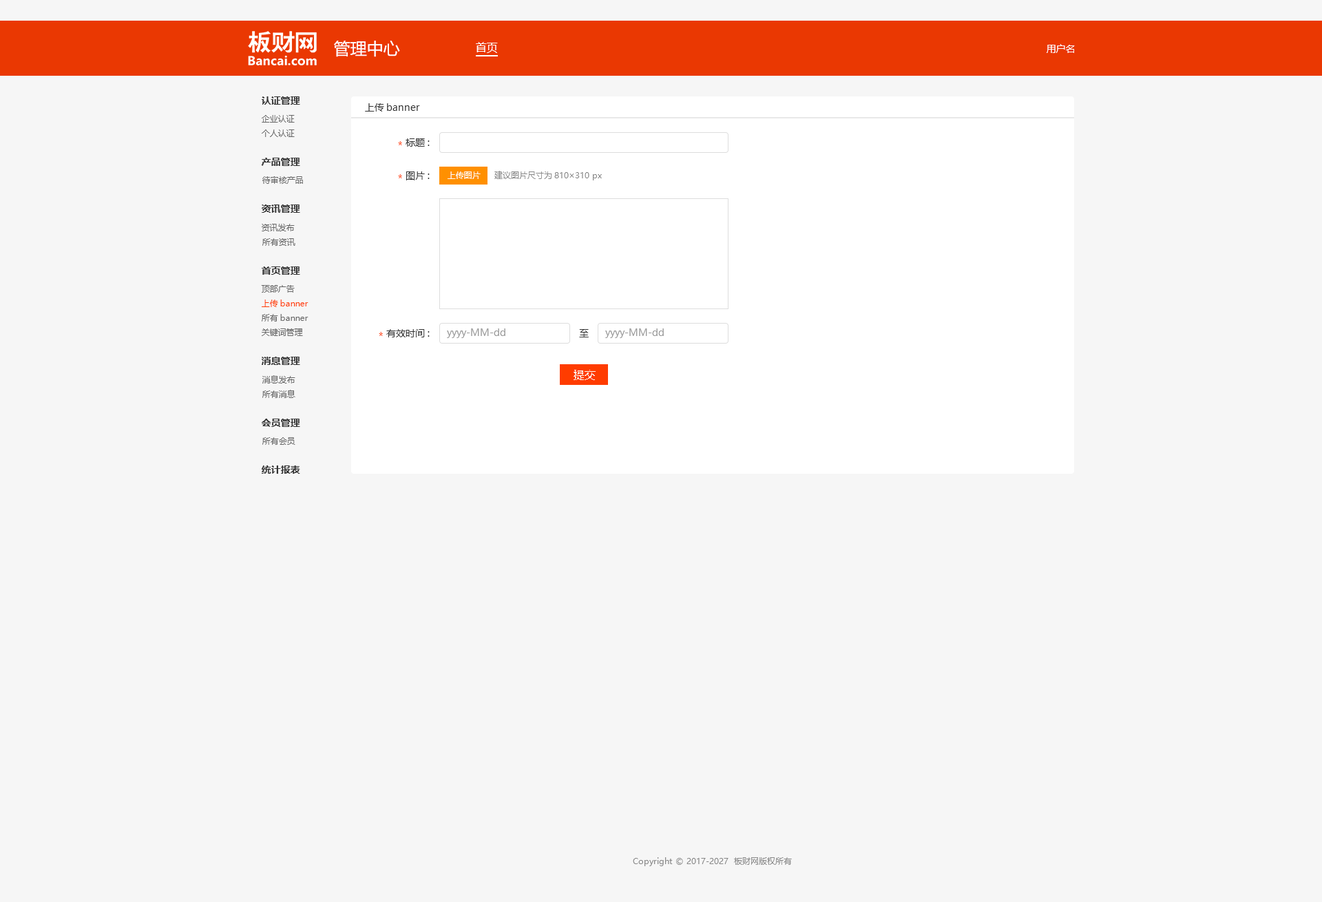
<style>
.page{position:relative;width:1322px;height:902px;background:#f6f6f6}
.page>*{position:absolute;margin:0}
.t1{font:16.5px "MicrosoftYaHei";color:#ffffff}
.t2{font:11px "MicrosoftYaHei";color:#ffffff}
.t3{font:9.6px "MicrosoftYaHei";color:#ffffff}
.t4{font:9.6px "MicrosoftYaHei-Bold";color:#333333}
.t5{font:9.6px "MicrosoftYaHei";color:#333333}
.t6{font:8.3px "MicrosoftYaHei";color:#666666}
.t7{font:9.6px "MicrosoftYaHei";color:#ff3c00}
.t8{font:8.3px "MicrosoftYaHei";color:#fffefe}
.t9{font:8.3px "MicrosoftYaHei";color:#888888}
.t10{font:8.3px "MicrosoftYaHei";color:#ff3c00}
.t11{font:9.6px "MicrosoftYaHei";color:#999999}
.t12{font:11px "MicrosoftYaHei";color:#fffefe}
</style>
<div class="page">
<p class="t1" style="left:334px;top:41px;width:66px;height:16px">管理中心</p>
<p class="t2" style="left:476px;top:42px;width:22px;height:11px">首页</p>
<p class="t3" style="left:1047px;top:44px;width:28px;height:9px">用户名</p>
<p class="t4" style="left:262px;top:96px;width:38px;height:9px">认证管理</p>
<p class="t5" style="left:365px;top:103px;width:55px;height:9px">上传banner</p>
<p class="t6" style="left:262px;top:115px;width:33px;height:8px">企业认证</p>
<p class="t6" style="left:262px;top:129px;width:33px;height:8px">个人认证</p>
<p class="t7" style="left:398px;top:141px;width:4px;height:4px">*</p>
<p class="t5" style="left:406px;top:138px;width:24px;height:9px">标题:</p>
<p class="t4" style="left:261px;top:158px;width:39px;height:8px">产品管理</p>
<p class="t5" style="left:406px;top:171px;width:24px;height:9px">图片:</p>
<p class="t8" style="left:448px;top:171px;width:33px;height:8px">上传图片</p>
<p class="t9" style="left:494px;top:171px;width:108px;height:9px">建议图片尺寸为810×310 px</p>
<p class="t6" style="left:262px;top:176px;width:41px;height:8px">待审核产品</p>
<p class="t7" style="left:398px;top:174px;width:4px;height:4px">*</p>
<p class="t4" style="left:262px;top:204px;width:38px;height:9px">资讯管理</p>
<p class="t6" style="left:262px;top:224px;width:33px;height:7px">资讯发布</p>
<p class="t6" style="left:262px;top:238px;width:33px;height:8px">所有资讯</p>
<p class="t4" style="left:262px;top:266px;width:38px;height:9px">首页管理</p>
<p class="t6" style="left:261px;top:285px;width:34px;height:8px">顶部广告</p>
<p class="t10" style="left:262px;top:300px;width:46px;height:7px">上传banner</p>
<p class="t6" style="left:262px;top:314px;width:46px;height:8px">所有banner</p>
<p class="t6" style="left:262px;top:328px;width:41px;height:8px">关键词管理</p>
<p class="t5" style="left:386px;top:329px;width:44px;height:8px">有效时间:</p>
<p class="t11" style="left:447px;top:328px;width:58px;height:10px">yyyy-MM-dd</p>
<p class="t5" style="left:579px;top:329px;width:10px;height:8px">至</p>
<p class="t11" style="left:605px;top:328px;width:59px;height:10px">yyyy-MM-dd</p>
<p class="t7" style="left:379px;top:332px;width:4px;height:4px">*</p>
<p class="t4" style="left:262px;top:357px;width:38px;height:8px">消息管理</p>
<p class="t6" style="left:262px;top:375px;width:33px;height:9px">消息发布</p>
<p class="t12" style="left:574px;top:370px;width:22px;height:10px">提交</p>
<p class="t6" style="left:262px;top:390px;width:33px;height:8px">所有消息</p>
<p class="t4" style="left:262px;top:419px;width:38px;height:8px">会员管理</p>
<p class="t6" style="left:262px;top:437px;width:33px;height:8px">所有会员</p>
<p class="t4" style="left:262px;top:465px;width:38px;height:9px">统计报表</p>
<p class="t9" style="left:633px;top:857px;width:159px;height:9px">Copyright © 2017-2027  板财网版权所有</p>
</div>
